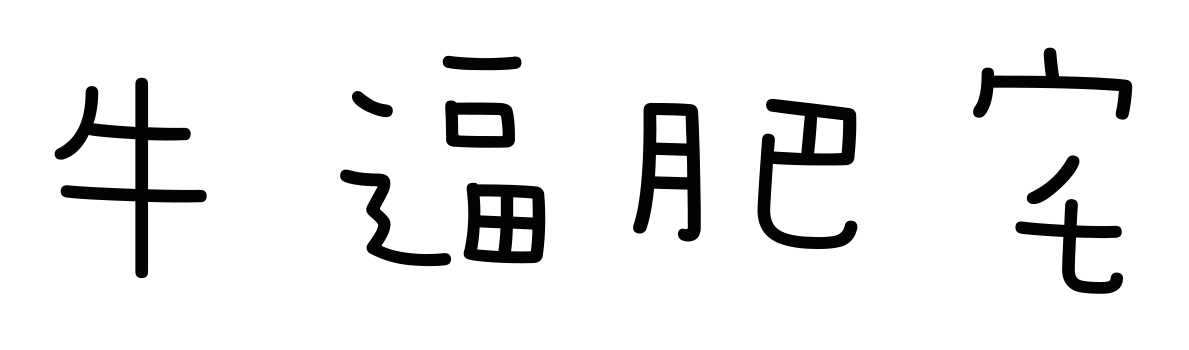
<style>
.page{position:relative;width:1189px;height:350px;background:#ffffff}
.page>*{position:absolute;margin:0}
.t1{font:314.5px "DFEr-W3-WIN-BF";letter-spacing:-0.02em;color:#030303;text-transform:uppercase}
</style>
<div class="page">
<p class="t1" style="left:54px;top:47px;width:1079px;height:247px">牛逼肥宅</p>
</div>
